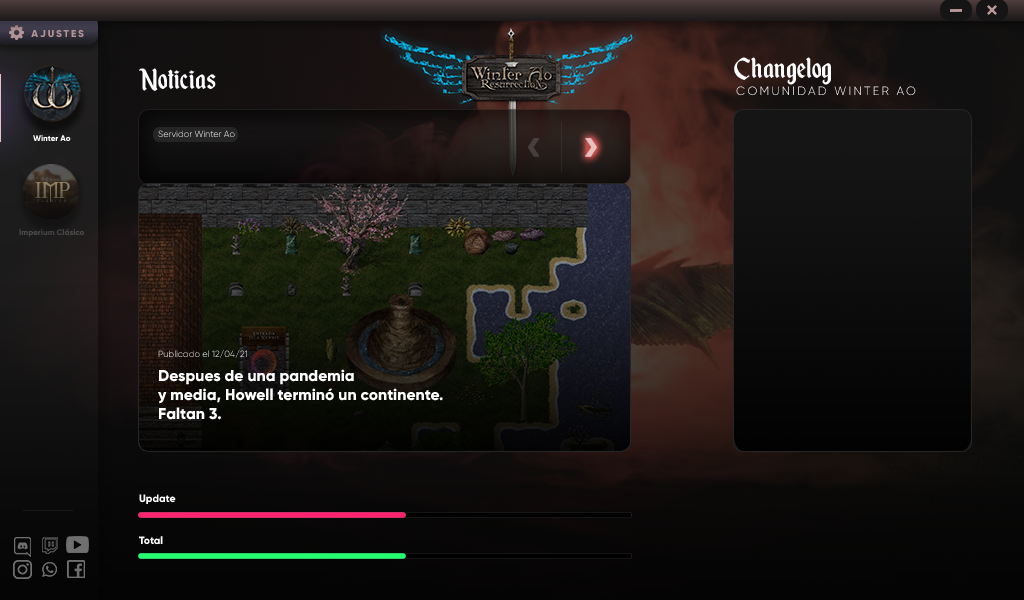
<style>
.page{position:relative;width:1024px;height:600px}
.page>*{position:absolute;margin:0}
.t1{font:10px "Gilroy-ExtraBold";letter-spacing:0.19em;color:#b49494;text-transform:uppercase}
.t2{font:34.6px "EnchantedLand";color:#ffffff}
.t3{font:12px "Gilroy-Light";letter-spacing:0.19em;color:#ffffff;text-transform:uppercase}
.t4{font:8.1px "Gilroy-ExtraBold";color:#ffffff}
.t5{font:9px "Gilroy-Light"}
.t6{font:21.5px "Morpheus";text-transform:uppercase}
.t7{font:3.1px "Morpheus";letter-spacing:0.88em}
.t8{font:8.1px "Gilroy-ExtraBold";color:#4a4a4a}
.t9{font:15.8px "Gilroy-ExtraBold";color:#ffffff}
.t10{font:10.6px "Gilroy-ExtraBold";color:#ffffff}
</style>
<div class="page">
<p class="t1" style="left:31px;top:29px;width:53px;height:9px">aJUSTES</p>
<p class="t2" style="left:734px;top:57px;width:97px;height:28px">Changelog</p>
<p class="t2" style="left:139px;top:68px;width:77px;height:23px">Noticias</p>
<p class="t3" style="left:736px;top:86px;width:180px;height:10px">COMUNIDAD WINTER AO</p>
<p class="t4" style="left:33px;top:135px;width:38px;height:6px">Winter Ao</p>
<p class="t5" style="left:158px;top:130px;width:77px;height:7px">Servidor Winter Ao</p>
<p class="t6" style="left:35px;top:182px;width:35px;height:21px">imp</p>
<p class="t7" style="left:37px;top:199px;width:29px;height:3px">CLÁSICO</p>
<p class="t8" style="left:19px;top:229px;width:65px;height:8px">Imperium Clásico</p>
<p class="t5" style="left:158px;top:349px;width:89px;height:9px">Publicado el 12/04/21</p>
<p class="t9" style="left:158px;top:369px;width:285px;height:51px">Despues de una pandemia<br>y media, Howell terminó un continente.<br>Faltan 3.</p>
<p class="t10" style="left:139px;top:494px;width:37px;height:10px">Update</p>
<p class="t10" style="left:139px;top:536px;width:24px;height:9px">Total</p>
</div>
